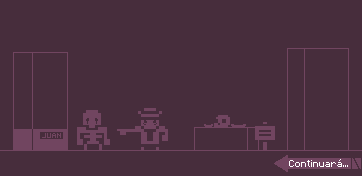
<style>
.page{position:relative;width:362px;height:176px;background:#472d3c}
.page>*{position:absolute;margin:0}
.t1{font:8px "Minecraftia-Regular";color:#ffffff}
</style>
<div class="page">
<p class="t1" style="left:289px;top:159px;width:59px;height:8px">Continuará...</p>
</div>
